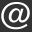
<style>
.page{position:relative;width:32px;height:32px;background:#333333}
.page>*{position:absolute;margin:0}
.t1{font:36px "Helvetica";color:#ffffff}
</style>
<div class="page">
<p class="t1" style="left:1px;top:2px;width:29px;height:28px">@</p>
</div>
